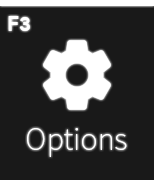
<style>
.page{position:relative;width:154px;height:180px;background:#191919}
.page>*{position:absolute;margin:0}
.t1{font:20.8px "ProductSans-Bold";color:#ffffff}
.t2{font:29.2px "NotoSansCJKkr-Thin";color:#ffffff}
</style>
<div class="page">
<p class="t1" style="left:8px;top:16px;width:22px;height:15px">F3</p>
<p class="t2" style="left:27px;top:128px;width:100px;height:29px">Options</p>
</div>
